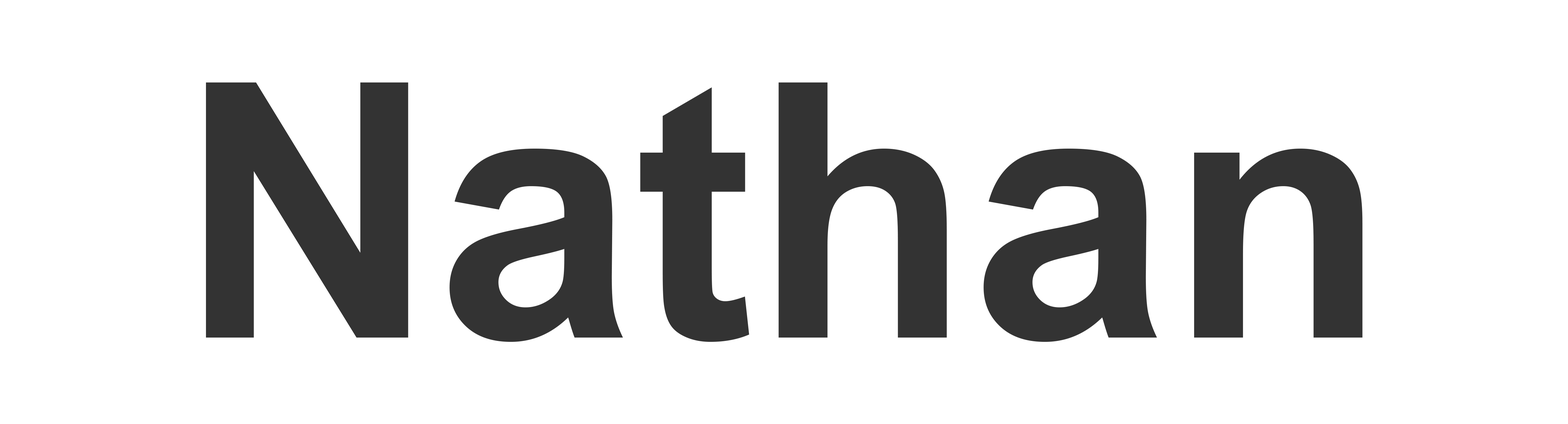
<style>
.page{position:relative;width:1568px;height:424px;background:#ffffff}
.page>*{position:absolute;margin:0}
.t1{font:356.1px "Arial-BoldMT";color:#333333}
</style>
<div class="page">
<p class="t1" style="left:206px;top:82px;width:1157px;height:260px">Nathan</p>
</div>
